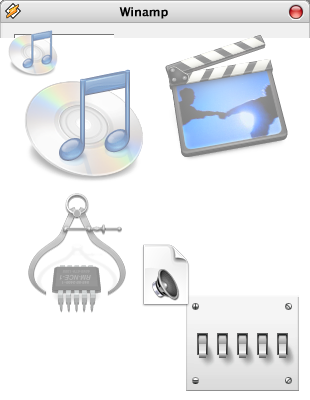
<style>
.page{position:relative;width:310px;height:400px;background:#ffffff}
.page>*{position:absolute;margin:0}
.t1{font:12px "LucidaGrande";color:#000000;font-weight:bold}
</style>
<div class="page">
<p class="t1" style="left:119px;top:7px;width:49px;height:12px">Winamp</p>
</div>
